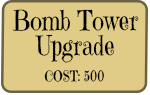
<style>
.page{position:relative;width:150px;height:95px;background:#e0cc87}
.page>*{position:absolute;margin:0}
.t1{font:27.4px/25.3px "EmilysCandy-Regular";color:#000000;scale:0.83 1}
.t2{font:14.5px "EmilysCandy-Regular";color:#000000;scale:0.83 1}
</style>
<div class="page">
<p class="t1" style="left:12px;top:9px;width:127px;height:54px;text-align:center">Bomb Tower<br>Upgrade</p>
<p class="t2" style="left:44px;top:69px;width:60px;height:13px">COST: 500</p>
</div>
